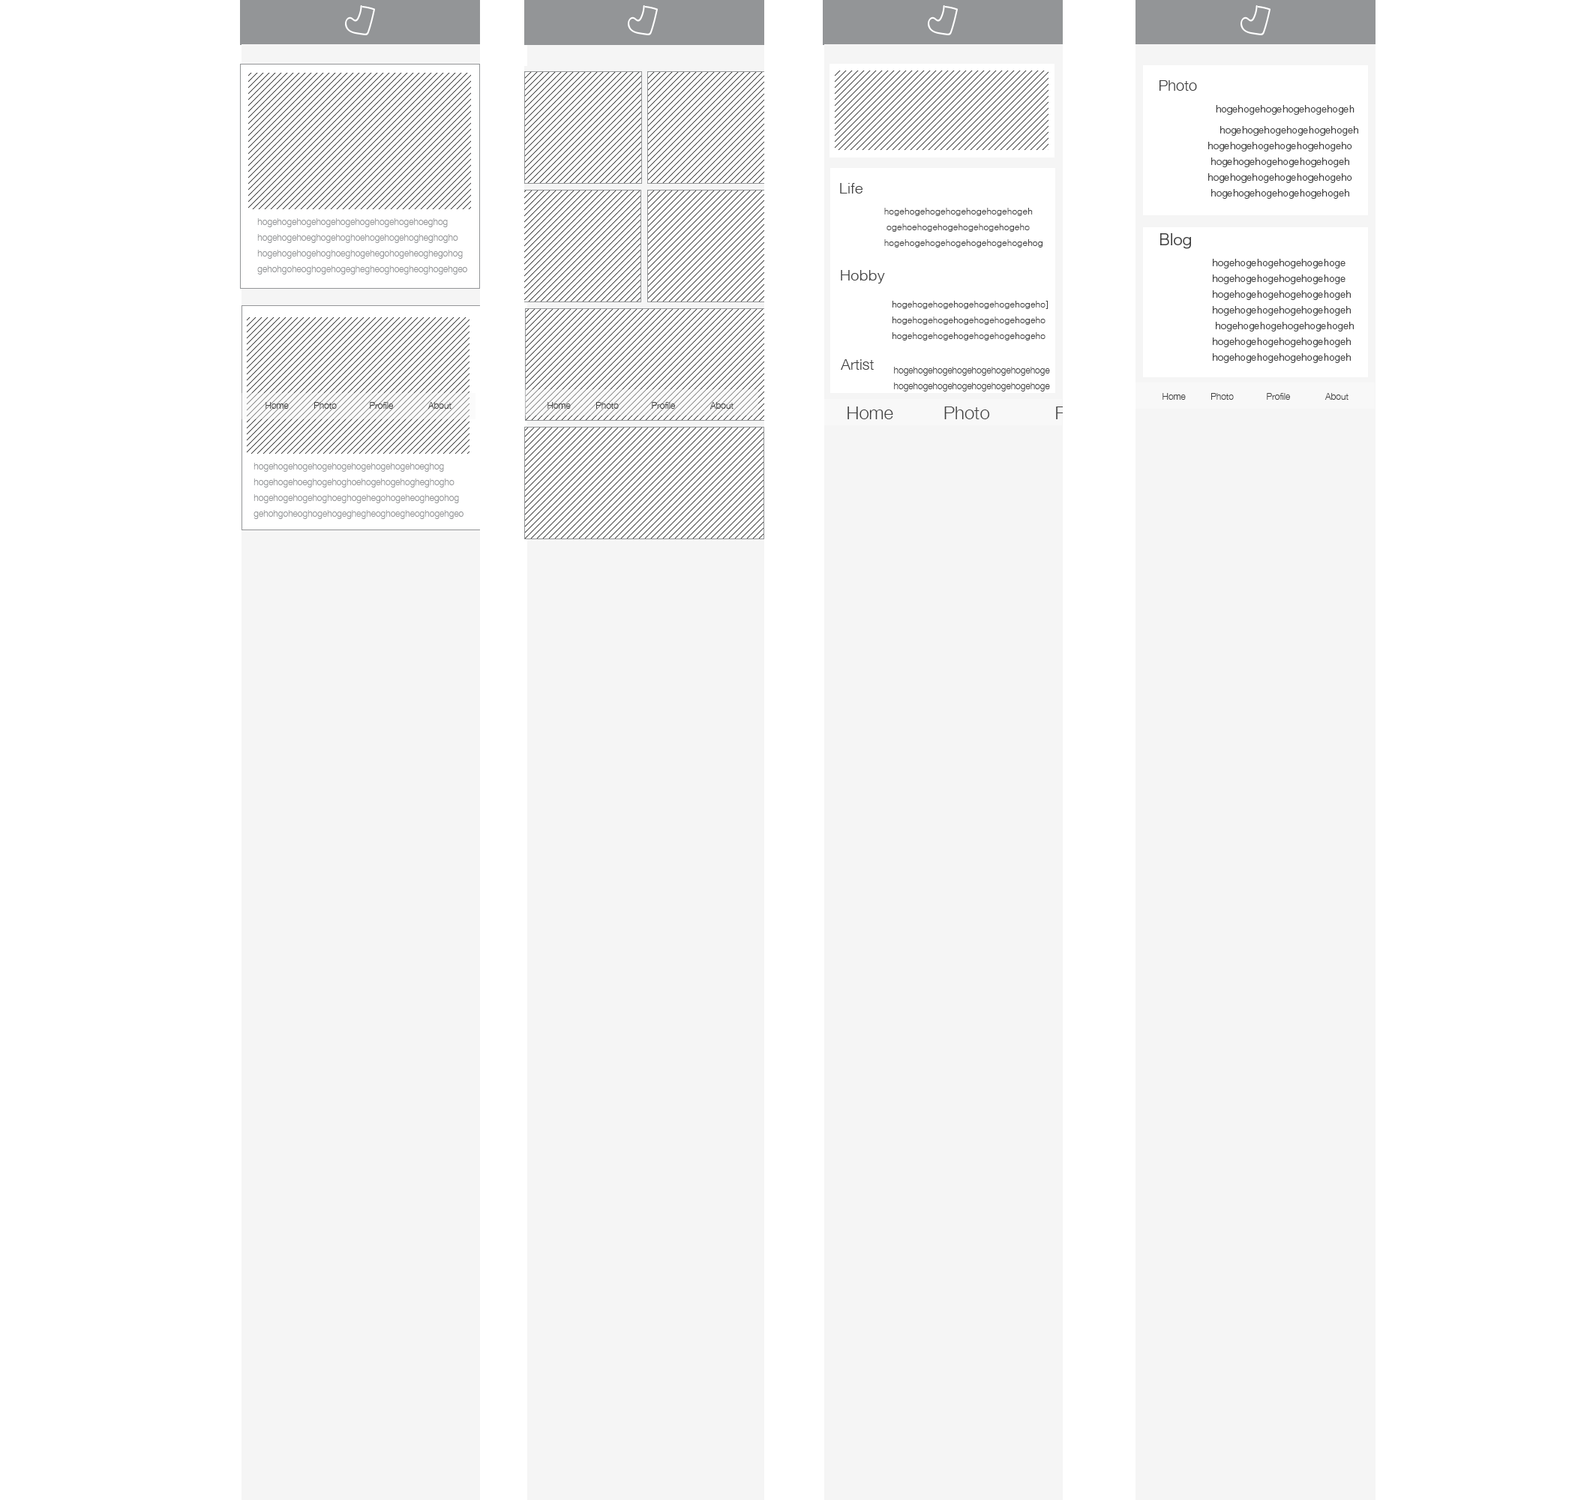
<style>
.page{position:relative;width:1584px;height:1500px;background:#ffffff}
.page>*{position:absolute;margin:0}
.t1{font:15px "HelveticaNeue-Light";color:#404040}
.t2{font:9px "HiraKakuProN-W3";color:#404040}
.t3{font:15px "HiraKakuProN-W3";color:#404040}
.t4{font:9px "Helvetica-Light";color:#404040}
.t5{font:15px "Helvetica-Light";color:#404040}
.t6{font:9px "HelveticaNeue-Light";color:#939597}
.t7{font:9px "HelveticaNeue-Light";color:#404040}
.t8{font:18px "HelveticaNeue-Light"}
</style>
<div class="page">
<p class="t1" style="left:1160px;top:80px;width:37px;height:11px">Photo</p>
<p class="t2" style="left:1208px;top:105px;width:150px;height:94px"><span class="t3">　    </span>hogehogehogehogehogehogeh<br>             hogehogehogehogehogehogeh<br>         hogehogehogehogehogehogeho<br>          hogehogehogehogehogehogeh<br>         hogehogehogehogehogehogeho<br>          hogehogehogehogehogehogeh</p>
<p class="t4" style="left:840px;top:183px;width:202px;height:65px"><span class="t5">Life<br></span>                  hogehogehogehogehogehogehogeh<br>                   ogehoehogehogehogehogehogeho<br>                  hogehogehogehogehogehogehogehog</p>
<p class="t6" style="left:257px;top:218px;width:210px;height:56px">hogehogehogehogehogehogehogehogehoeghog<br>hogehogehoeghogehoghoehogehogehogheghogho<br>hogehogehogehoghoeghogehegohogeheoghegohog<br>gehohgoheoghogehogeghegheoghoegheoghogehgeo</p>
<p class="t3" style="left:1160px;top:233px;width:32px;height:16px">Blog</p>
<p class="t5" style="left:841px;top:270px;width:44px;height:14px">Hobby</p>
<p class="t2" style="left:1213px;top:259px;width:141px;height:104px">hogehogehogehogehogehoge<br>                 hogehogehogehogehogehoge<br>                 hogehogehogehogehogehogeh<br>                 hogehogehogehogehogehogeh<br>                  hogehogehogehogehogehogeh<br>                 hogehogehogehogehogehogeh<br>                 hogehogehogehogehogehogeh</p>
<p class="t4" style="left:892px;top:301px;width:156px;height:39px">hogehogehogehogehogehogehogeho]<br>hogehogehogehogehogehogehogeho<br>hogehogehogehogehogehogehogeho</p>
<p class="t1" style="left:841px;top:359px;width:33px;height:11px">Artist</p>
<p class="t7" style="left:894px;top:367px;width:156px;height:25px">hogehogehogehogehogehogehogehoge<br>hogehogehogehogehogehogehogehoge</p>
<p class="t7" style="left:1162px;top:393px;width:186px;height:7px">Home          Photo             Profile              About</p>
<p class="t7" style="left:266px;top:402px;width:186px;height:7px">Home          Photo             Profile              About</p>
<p class="t7" style="left:548px;top:402px;width:186px;height:7px">Home          Photo             Profile              About</p>
<p class="t8" style="left:848px;top:406px;width:371px;height:13px">Home          Photo             Profile              About</p>
<p class="t6" style="left:254px;top:463px;width:210px;height:56px">hogehogehogehogehogehogehogehogehoeghog<br>hogehogehoeghogehoghoehogehogehogheghogho<br>hogehogehogehoghoeghogehegohogeheoghegohog<br>gehohgoheoghogehogeghegheoghoegheoghogehgeo</p>
</div>
